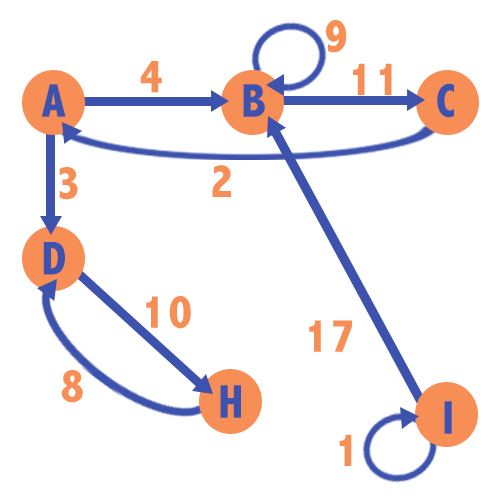
<style>
.page{position:relative;width:500px;height:500px;background:#ffffff}
.page>*{position:absolute;margin:0}
.t1{font:47.8px "AbadiMT-CondensedExtraBold";letter-spacing:0.075em;color:#f68e56;scale:0.96 1}
.t2{font:47.8px "AbadiMT-CondensedExtraBold";letter-spacing:0.075em;color:#3d52ac;scale:0.96 1}
</style>
<div class="page">
<p class="t1" style="left:326px;top:20px;width:21px;height:33px">9</p>
<p class="t1" style="left:140px;top:61px;width:22px;height:32px">4</p>
<p class="t1" style="left:353px;top:63px;width:39px;height:32px">11</p>
<p class="t2" style="left:41px;top:84px;width:25px;height:33px">A</p>
<p class="t2" style="left:243px;top:84px;width:22px;height:33px">B</p>
<p class="t2" style="left:437px;top:83px;width:17px;height:35px">C</p>
<p class="t1" style="left:59px;top:167px;width:19px;height:33px">3</p>
<p class="t1" style="left:212px;top:165px;width:19px;height:32px">2</p>
<p class="t2" style="left:43px;top:242px;width:22px;height:33px">D</p>
<p class="t1" style="left:146px;top:296px;width:45px;height:33px">10</p>
<p class="t1" style="left:309px;top:320px;width:43px;height:32px">17</p>
<p class="t1" style="left:61px;top:370px;width:22px;height:33px">8</p>
<p class="t2" style="left:220px;top:385px;width:21px;height:33px">H</p>
<p class="t2" style="left:444px;top:401px;width:8px;height:33px">I</p>
<p class="t1" style="left:339px;top:434px;width:13px;height:32px">1</p>
</div>
